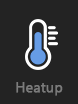
<style>
.page{position:relative;width:78px;height:104px;background:#232323}
.page>*{position:absolute;margin:0}
.t1{font:14px "SegoeUI";color:#7c7c7c;font-weight:bold}
</style>
<div class="page">
<p class="t1" style="left:16px;top:82px;width:47px;height:14px">Heatup</p>
</div>
